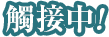
<style>
.page{position:relative;width:109px;height:37px;background:#28737e}
.page>*{position:absolute;margin:0}
.t1{font:30px "RyuminPr6N-ExBold";color:#fffffd}
.t2{font:30px "RyuminPr6N-ExBold";color:#fffffd;font-style:italic}
</style>
<div class="page">
<p class="t1" style="left:6px;top:4px;width:99px;height:29px">觸接中<span class="t2">!</span></p>
</div>
